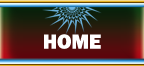
<style>
.page{position:relative;width:144px;height:66px}
.page>*{position:absolute;margin:0}
.t1{font:20.8px "FranklinGothic-Heavy";color:#ffffff}
</style>
<div class="page">
<p class="t1" style="left:44px;top:34px;width:57px;height:15px">HOME</p>
</div>
